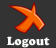
<style>
.page{position:relative;width:56px;height:48px;background:#333333}
.page>*{position:absolute;margin:0}
.t1{font:12px "CooperBlack";color:#f9fcf8}
</style>
<div class="page">
<p class="t1" style="left:7px;top:36px;width:43px;height:12px">Logout</p>
</div>
